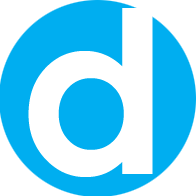
<style>
.page{position:relative;width:196px;height:196px;background:#ffffff}
.page>*{position:absolute;margin:0}
.t1{font:225.3px "CenturyGothic-Bold";letter-spacing:0.02em;color:#ffffff}
</style>
<div class="page">
<p class="t1" style="left:28px;top:8px;width:125px;height:169px">d</p>
</div>
